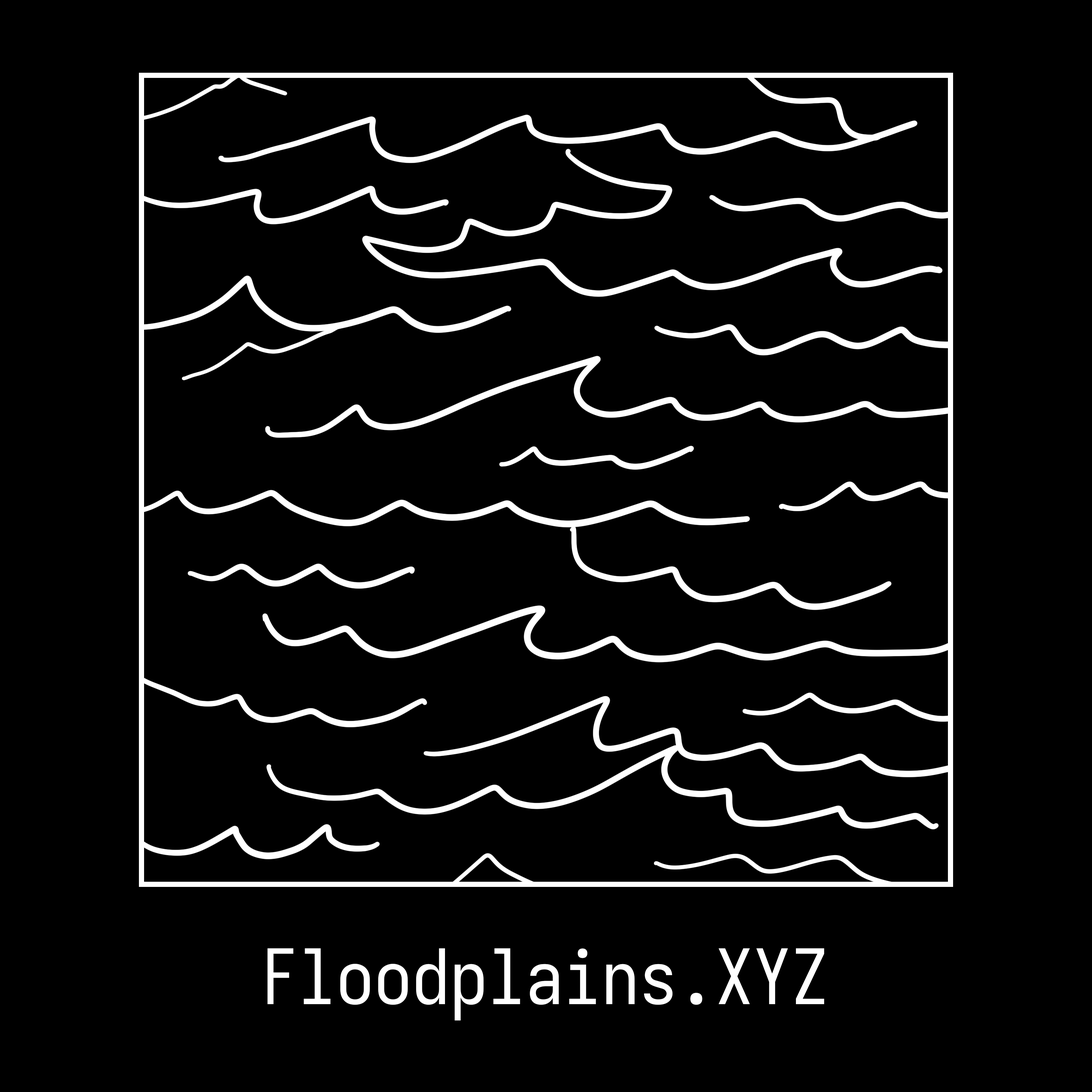
<style>
.page{position:relative;width:1092px;height:1092px;background:#000000}
.page>*{position:absolute;margin:0}
.t1{font:75.8px "Iosevka";color:#ffffff}
</style>
<div class="page">
<p class="t1" style="left:267px;top:948px;width:557px;height:73px">Floodplains.XYZ</p>
</div>
